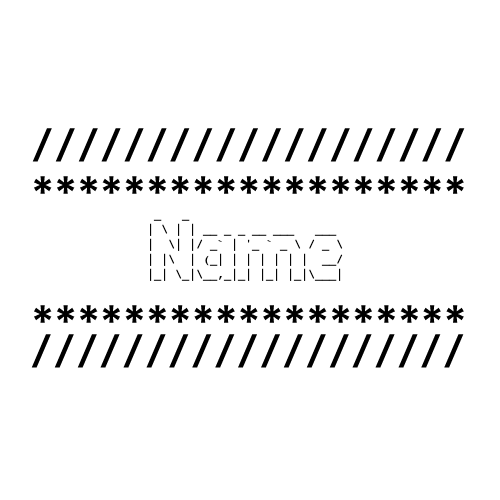
<style>
.page{position:relative;width:500px;height:500px;background:#ffffff}
.page>*{position:absolute;margin:0}
.t1{font:41.7px "Consolas-Bold";color:#000000}
</style>
<div class="page">
<p class="t1" style="left:32px;top:128px;width:433px;height:34px">///////////////////</p>
<p class="t1" style="left:34px;top:176px;width:430px;height:18px">*******************</p>
<p class="t1" style="left:34px;top:305px;width:430px;height:18px">*******************</p>
<p class="t1" style="left:31px;top:334px;width:433px;height:34px">///////////////////</p>
</div>
